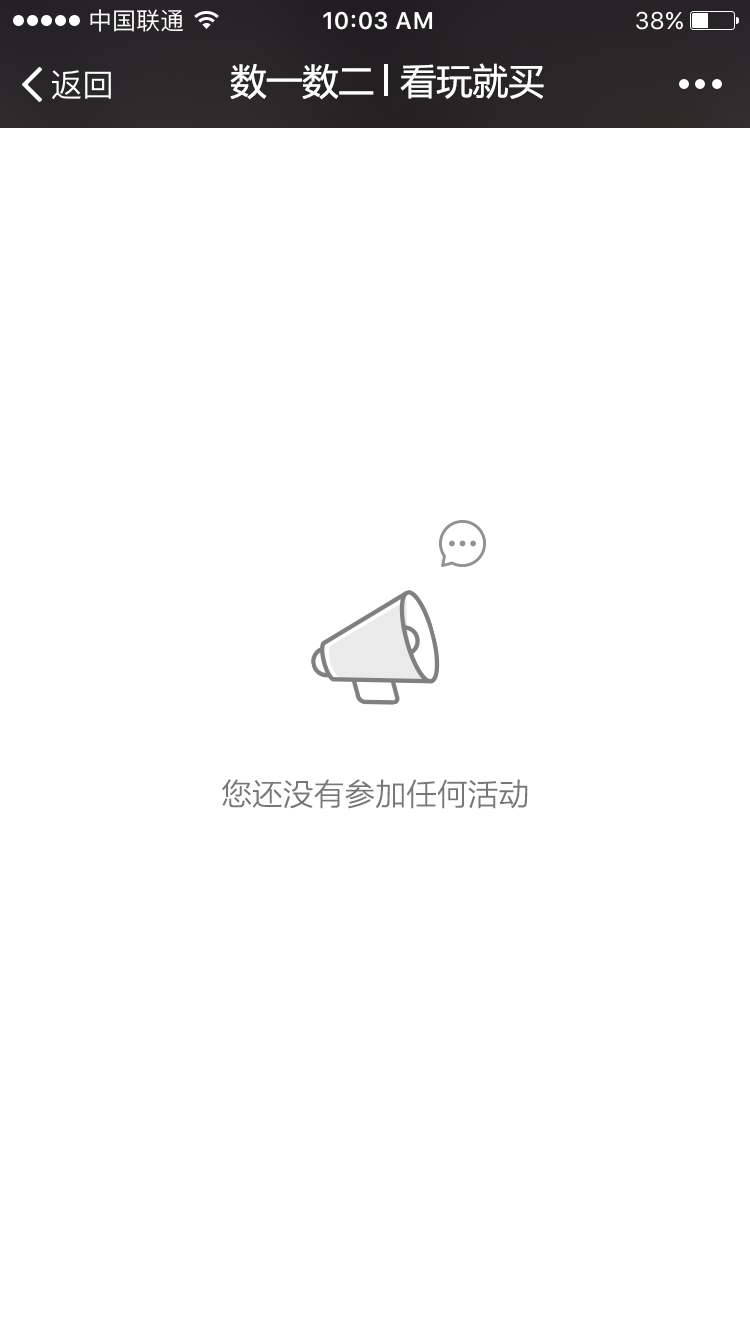
<style>
.page{position:relative;width:750px;height:1334px;background:#ffffff}
.page>*{position:absolute;margin:0}
.t1{font:36px "MicrosoftYaHei";color:#ffffff}
.t2{font:30px "MicrosoftYaHeiLight";color:#777777;font-weight:bold}
</style>
<div class="page">
<p class="t1" style="left:230px;top:63px;width:144px;height:37px">数一数二</p>
<p class="t1" style="left:400px;top:63px;width:144px;height:36px">看玩就买</p>
<p class="t2" style="left:222px;top:779px;width:306px;height:30px">您还没有参加任何活动</p>
</div>
